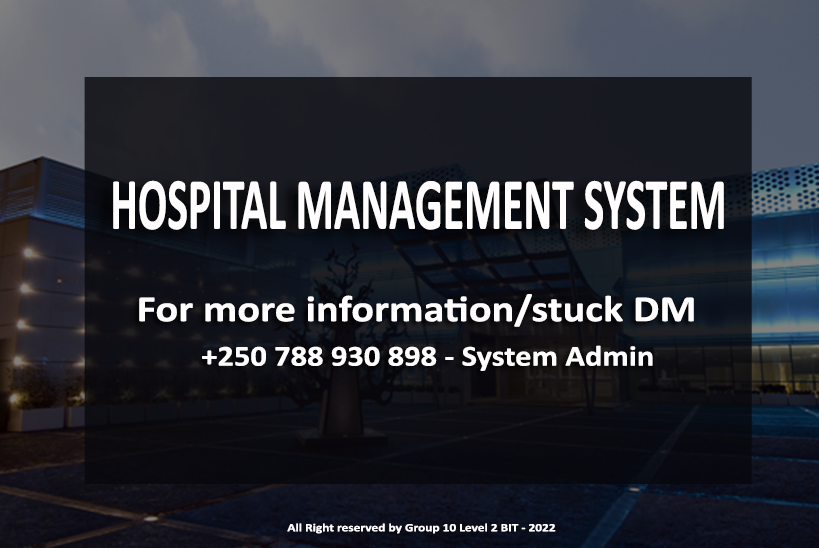
<style>
.page{position:relative;width:819px;height:548px}
.page>*{position:absolute;margin:0}
.t1{font:74.3px "Calibri-Bold";color:#fffdfd;scale:0.59 1}
.t2{font:37.2px "Calibri-Bold";color:#fffdfd;scale:1.14 1}
.t3{font:29.2px "Calibri-Bold";color:#fffdfd;scale:1.11 1}
.t4{font:11.3px "Calibri-Bold";color:#fffdfd;scale:1.19 1}
</style>
<div class="page">
<p class="t1" style="left:113px;top:180px;width:611px;height:50px">HOSPITAL MANAGEMENT SYSTEM</p>
<p class="t2" style="left:139px;top:294px;width:555px;height:33px">For more information/stuck DM</p>
<p class="t3" style="left:202px;top:345px;width:451px;height:26px">+250 788 930 898 - System Admin</p>
<p class="t4" style="left:287px;top:523px;width:269px;height:11px">All Right reserved by Group 10 Level 2 BIT - 2022</p>
</div>
